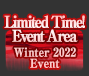
<style>
.page{position:relative;width:89px;height:76px;background:#333333}
.page>*{position:absolute;margin:0}
.t1{font:16px/14px "RyuminPro-ExBold";letter-spacing:-0.12em;color:#ffe1e1;font-weight:bold;scale:0.9 1}
.t2{font:12px/11px "RyuminPro-ExBold";letter-spacing:-0.02em;color:#ffcbcb;font-weight:bold;scale:0.9 1}
</style>
<div class="page">
<p class="t1" style="left:4px;top:15px;width:81px;height:27px;text-align:center">Limited Time!<br>Event Area</p>
<p class="t2" style="left:14px;top:47px;width:62px;height:21px;text-align:center">Winter 2022<br>Event</p>
</div>
